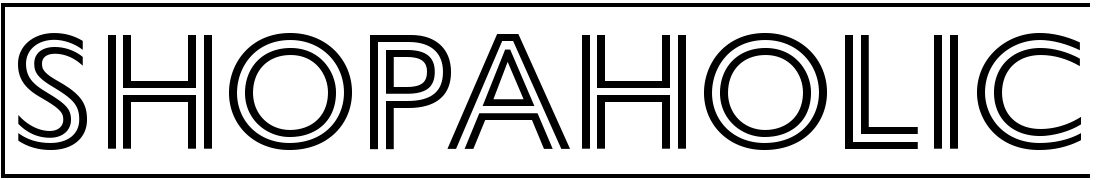
<style>
.page{position:relative;width:1100px;height:180px;background:#ffffff}
.page>*{position:absolute;margin:0}
.t1{font:166.7px "GillSansNovaInline-Regular";color:#000000}
</style>
<div class="page">
<p class="t1" style="left:18px;top:33px;width:1063px;height:117px">shopaholic</p>
</div>
